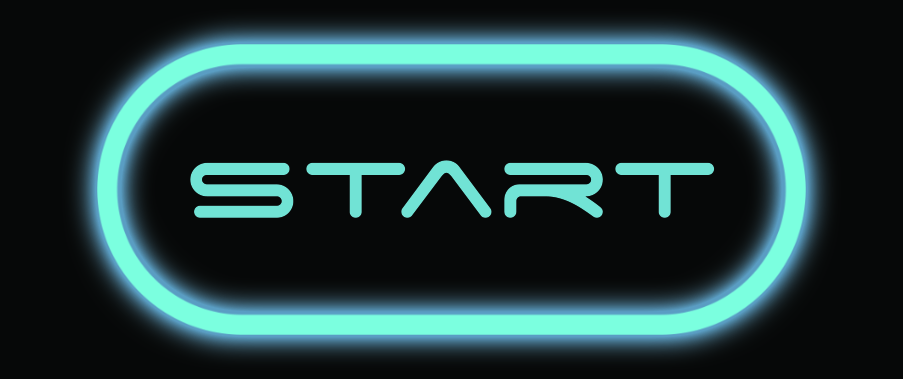
<style>
.page{position:relative;width:903px;height:379px;background:#060808}
.page>*{position:absolute;margin:0}
.t1{font:125.9px "SpaceAge";color:#71e3d5}
</style>
<div class="page">
<p class="t1" style="left:190px;top:160px;width:525px;height:58px">Start</p>
</div>
